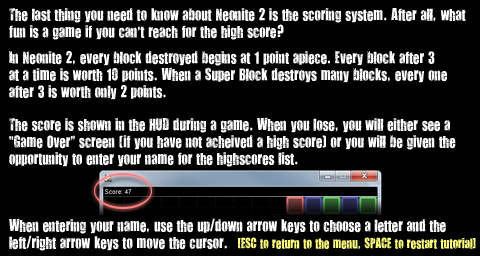
<style>
.page{position:relative;width:480px;height:256px;background:#000000}
.page>*{position:absolute;margin:0}
.t1{font:14px "YouAreLoved";color:#ffffff}
.t2{font:12px "YouAreLoved";color:#ffff80}
</style>
<div class="page">
<p class="t1" style="left:9px;top:8px;width:467px;height:243px">The last thing you need to know about Neonite 2 is the scoring system. After all, what<br>fun is a game if you can’t reach for the high score?<br><br>In Neonite 2, every block destroyed begins at 1 point apiece. Every block after 3<br>at a time is worth 10 points. When a Super Block destroys many blocks, every one<br>after 3 is worth only 2 points.<br><br>The score is shown in the HUD during a game. When you lose, you will either see a<br>“Game Over” screen (if you have not acheived a high score) or you will be given the<br>opportunity to enter your name for the highscores list.<br><br><br><br>When entering your name, use the up/down arrow keys to choose a letter and the<br>left/right arrow keys to move the cursor.   <span class="t2">[ESC to return to the menu, SPACE to restart tutorial]</span></p>
</div>
